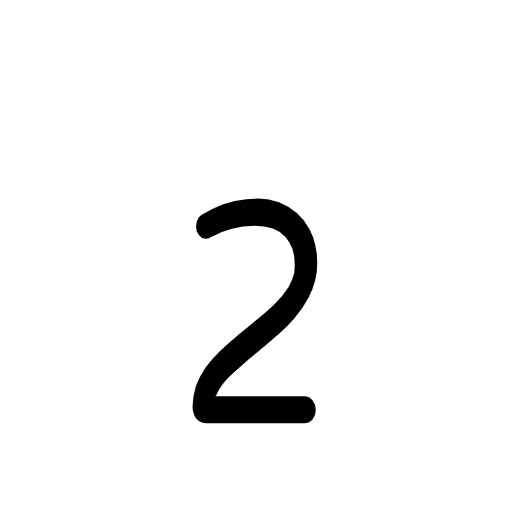
<style>
.page{position:relative;width:512px;height:512px;background:#ffffff}
.page>*{position:absolute;margin:0}
.t1{font:317.3px "VarelaRound-Regular";color:#000000;scale:0.81 1}
</style>
<div class="page">
<p class="t1" style="left:192px;top:198px;width:126px;height:226px">2</p>
</div>
